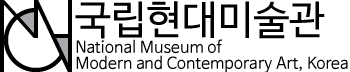
<style>
.page{position:relative;width:350px;height:72px;background:#ffffff}
.page>*{position:absolute;margin:0}
.t1{font:40px "NanumBarunGothic";color:#000000}
.t2{font:16px/16px "NanumBarunGothic";color:#000000}
.t3{font:16px/28px "NanumBarunGothic";color:#000000}
</style>
<div class="page">
<p class="t1" style="left:75px;top:1px;width:250px;height:38px">국립현대미술관</p>
<p class="t2" style="left:76px;top:39px;width:272px;height:34px"><span class="t3">National Museum of</span><br>Modern and Contemporary Art, Korea</p>
</div>
